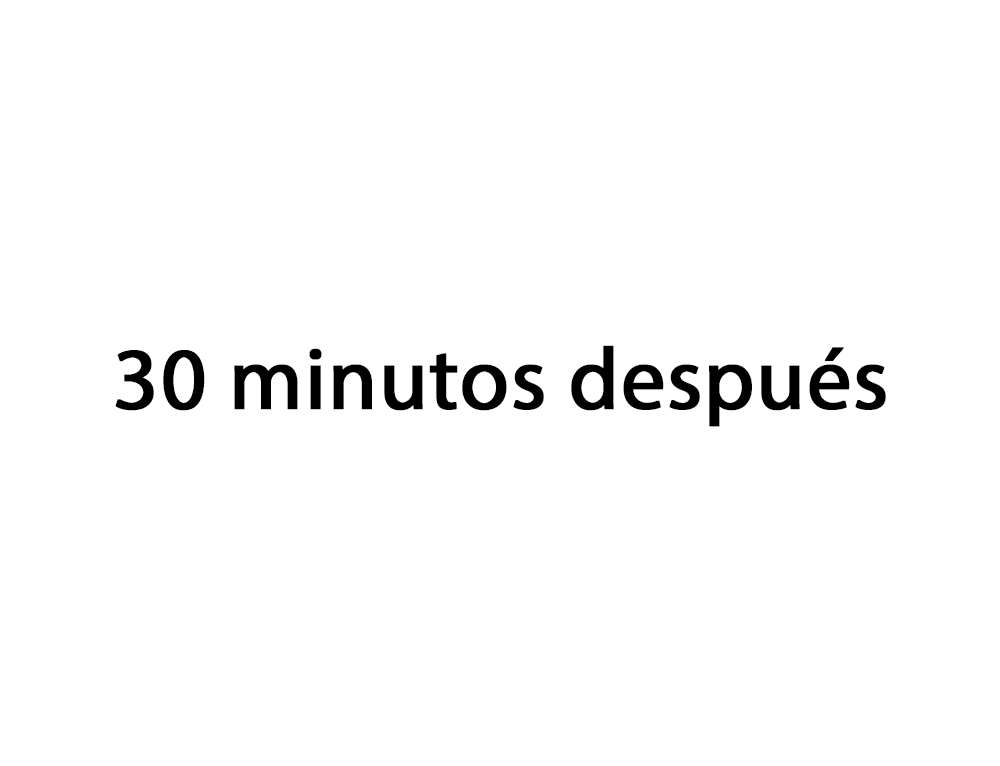
<style>
.page{position:relative;width:1000px;height:766px;background:#ffffff}
.page>*{position:absolute;margin:0}
.t1{font:87.7px "MyriadPro-Regular";color:#000000;font-weight:bold}
</style>
<div class="page">
<p class="t1" style="left:115px;top:345px;width:771px;height:82px">30 minutos después</p>
</div>
